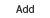
<style>
.page{position:relative;width:50px;height:18px;background:#ffffff}
.page>*{position:absolute;margin:0}
.t1{font:10px "KozGoPr6N-Regular";color:#333333}
</style>
<div class="page">
<p class="t1" style="left:16px;top:5px;width:18px;height:8px">Add</p>
</div>
